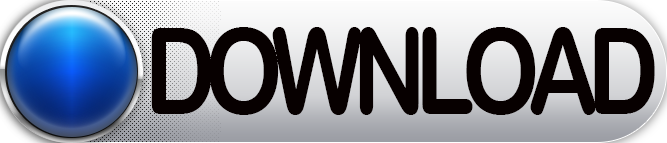
<style>
.page{position:relative;width:667px;height:143px;background:#070000}
.page>*{position:absolute;margin:0}
.t1{font:120px "ArialRoundedMTBold";letter-spacing:-0.12em;color:#070000;scale:0.82 1}
</style>
<div class="page">
<p class="t1" style="left:151px;top:27px;width:504px;height:88px">DOWNLOAD</p>
</div>
